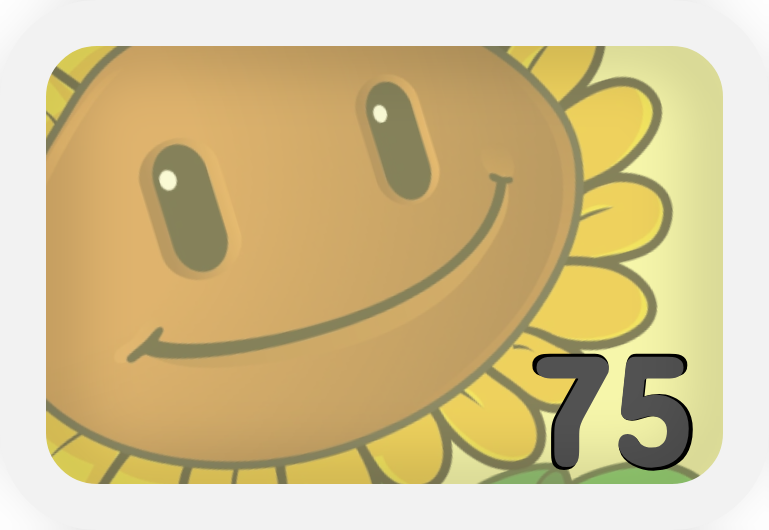
<style>
.page{position:relative;width:769px;height:530px;background:#f2f2f2}
.page>*{position:absolute;margin:0}
.t1{font:170.1px "ConcertOne-Regular";color:#505050}
.t2{font:161.4px "ConcertOne-Regular";color:#525252}
</style>
<div class="page">
<p class="t1" style="left:532px;top:353px;width:161px;height:118px">75</p>
<p class="t2" style="left:536px;top:356px;width:153px;height:112px">75</p>
</div>
